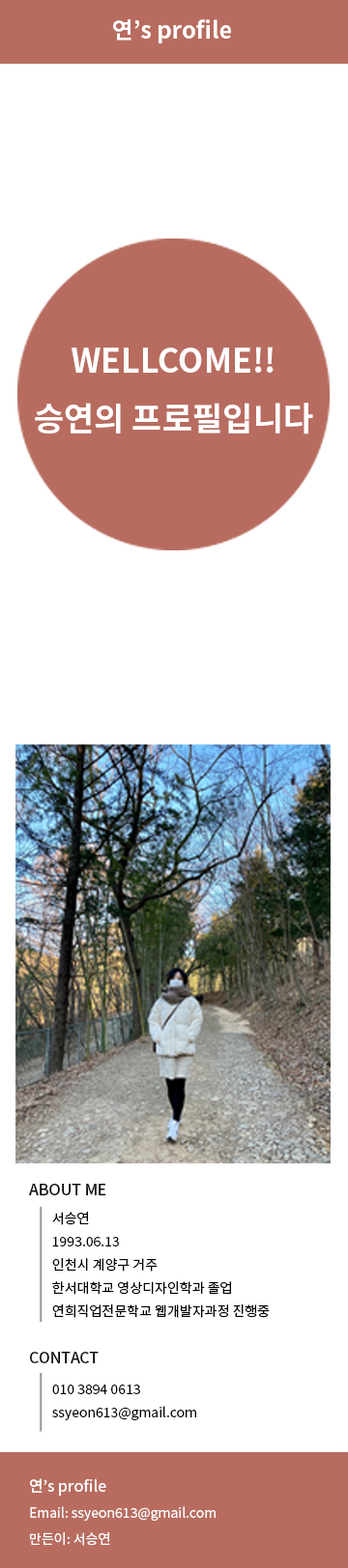
<style>
.page{position:relative;width:348px;height:1568px;background:#ffffff}
.page>*{position:absolute;margin:0}
.t1{font:23.2px "NotoSansKR-Bold";color:#ffffff}
.t2{font:32.8px/57.9px "NotoSansKR-Bold";color:#ffffff}
.t3{font:15.4px "NotoSansKR-Medium";color:#000000}
.t4{font:13.5px/23.2px "NotoSansKR-Regular";color:#000000}
.t5{font:13.5px/26.1px "NotoSansKR-Regular";color:#ffffff}
.t6{font:15.4px/26.1px "NotoSansKR-Medium";color:#ffffff}
</style>
<div class="page">
<p class="t1" style="left:113px;top:19px;width:118px;height:24px">연’s profile</p>
<p class="t2" style="left:35px;top:347px;width:278px;height:87px;text-align:center">WELLCOME!!<br>승연의 프로필입니다</p>
<p class="t3" style="left:29px;top:1184px;width:77px;height:11px">ABOUT ME</p>
<p class="t4" style="left:52px;top:1212px;width:217px;height:106px">서승연<br>1993.06.13<br>인천시 계양구 거주<br>한서대학교 영상디자인학과 졸업<br>연희직업전문학교 웹개발자과정 진행중</p>
<p class="t3" style="left:30px;top:1352px;width:68px;height:11px">CONTACT</p>
<p class="t4" style="left:52px;top:1385px;width:144px;height:35px">010 3894 0613<br>ssyeon613@gmail.com</p>
<p class="t5" style="left:30px;top:1478px;width:185px;height:68px"><span class="t6">연’s profile<br></span>Email: ssyeon613@gmail.com<br>만든이: 서승연</p>
</div>
